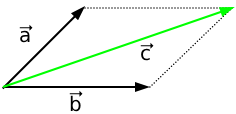
<style>
.page{position:relative;width:236px;height:114px;background:#ffffff}
.page>*{position:absolute;margin:0}
.t1{font:20px "DejaVuSans";color:#000000}
</style>
<div class="page">
<p class="t1" style="left:20px;top:30px;width:10px;height:13px">a</p>
<p class="t1" style="left:141px;top:48px;width:9px;height:13px">c</p>
<p class="t1" style="left:70px;top:95px;width:11px;height:17px">b</p>
</div>
